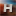
<style>
.page{position:relative;width:16px;height:16px}
.page>*{position:absolute;margin:0}
.t1{font:12.3px "ErasITC-Bold";color:#c5beb7}
</style>
<div class="page">
<p class="t1" style="left:3px;top:4px;width:10px;height:8px">H</p>
</div>
